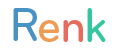
<style>
.page{position:relative;width:120px;height:50px;background:#ffffff}
.page>*{position:absolute;margin:0}
.t1{font:50px "Bryant-MediumCondensed";color:#4992c5}
.t2{font:50px "Bryant-MediumCondensed";color:#34c69e}
.t3{font:50px "Bryant-MediumCondensed";color:#ee9b54}
.t4{font:50px "Bryant-MediumCondensed";color:#e76c5b}
</style>
<div class="page">
<p class="t1" style="left:13px;top:8px;width:24px;height:33px">R</p>
<p class="t2" style="left:87px;top:8px;width:19px;height:34px">k</p>
<p class="t3" style="left:39px;top:20px;width:20px;height:22px">e</p>
<p class="t4" style="left:63px;top:20px;width:20px;height:22px">n</p>
</div>
